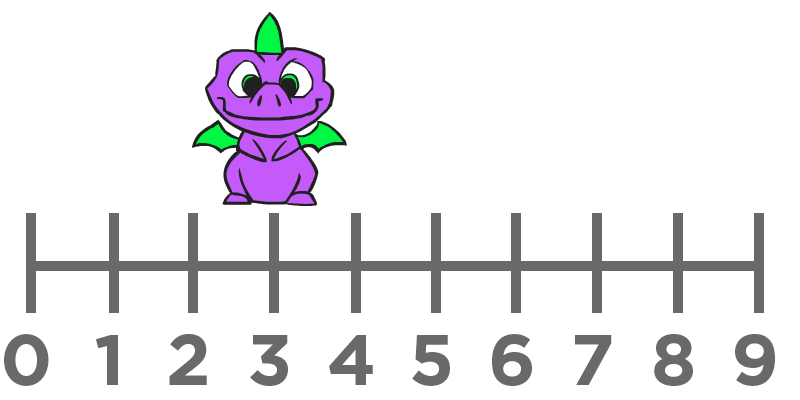
<style>
.page{position:relative;width:800px;height:400px;background:#ffffff}
.page>*{position:absolute;margin:0}
.t1{font:72px "Gotham-Bold";color:#696969}
</style>
<div class="page">
<p class="t1" style="left:4px;top:334px;width:45px;height:52px">0</p>
<p class="t1" style="left:96px;top:335px;width:22px;height:50px">1</p>
<p class="t1" style="left:169px;top:334px;width:38px;height:51px">2</p>
<p class="t1" style="left:250px;top:335px;width:38px;height:51px">3</p>
<p class="t1" style="left:329px;top:335px;width:44px;height:50px">4</p>
<p class="t1" style="left:412px;top:335px;width:38px;height:51px">5</p>
<p class="t1" style="left:492px;top:334px;width:40px;height:52px">6</p>
<p class="t1" style="left:575px;top:335px;width:37px;height:50px">7</p>
<p class="t1" style="left:654px;top:334px;width:39px;height:52px">8</p>
<p class="t1" style="left:735px;top:334px;width:40px;height:52px">9</p>
</div>
